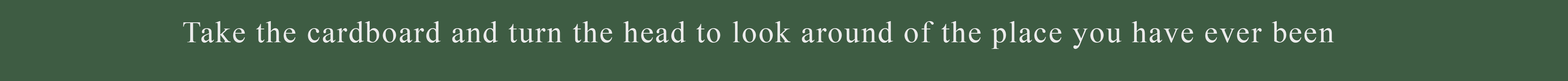
<style>
.page{position:relative;width:1568px;height:81px;background:#3e5c43}
.page>*{position:absolute;margin:0}
.t1{font:30.4px "TimesNewRomanPSMT";letter-spacing:0.05em;color:#ebebeb}
</style>
<div class="page">
<p class="t1" style="left:183px;top:21px;width:1151px;height:28px">Take the cardboard and turn the head to look around of the place you have ever been</p>
</div>
